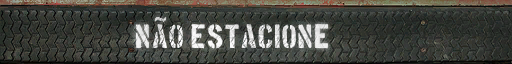
<style>
.page{position:relative;width:512px;height:64px}
.page>*{position:absolute;margin:0}
.t1{font:19.4px "ArialMT";letter-spacing:0.01em;font-weight:bold;scale:1.08 1}
.t2{font:26.5px "BostonTraffic";letter-spacing:0.01em;color:#ebebeb;scale:1.06 1}
</style>
<div class="page">
<p class="t1" style="left:154px;top:17px;width:13px;height:5px">~</p>
<p class="t2" style="left:136px;top:24px;width:192px;height:25px">NAO ESTACIONE</p>
</div>
